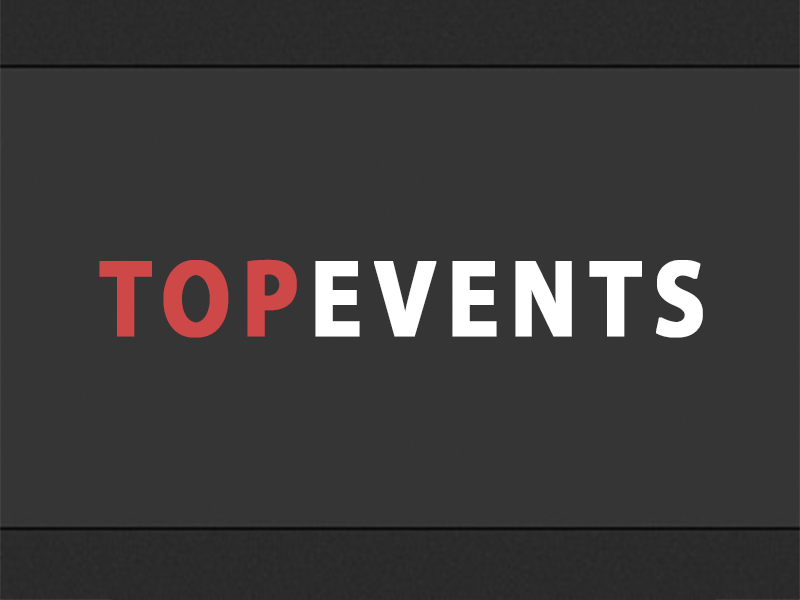
<style>
.page{position:relative;width:800px;height:600px;background:#353535}
.page>*{position:absolute;margin:0}
.t1{font:109.8px "MyriadPro-Bold";letter-spacing:0.1em;color:#ffffff;text-transform:uppercase;font-weight:bold;scale:0.87 1}
.t2{font:109.8px "MyriadPro-Bold";letter-spacing:0.1em;color:#cf4848;text-transform:uppercase;font-weight:bold;scale:0.87 1}
</style>
<div class="page">
<p class="t1" style="left:99px;top:259px;width:604px;height:79px"><span class="t2">TOP</span>Events</p>
</div>
